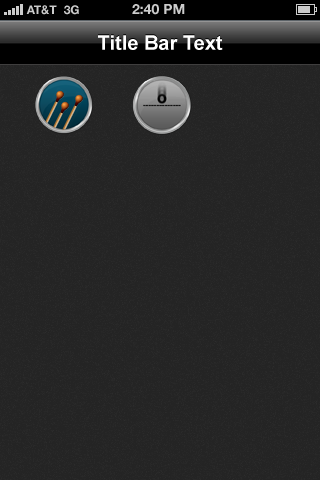
<style>
.page{position:relative;width:320px;height:480px;background:#242424}
.page>*{position:absolute;margin:0}
.t1{font:12px "HelveticaNeue-Bold";color:#cccccc}
.t2{font:14px "HelveticaNeue-Bold";color:#cccccc}
.t3{font:20px "Arial-BoldMT";color:#ffffff}
</style>
<div class="page">
<p class="t1" style="left:26px;top:5px;width:31px;height:10px">AT&amp;T</p>
<p class="t1" style="left:64px;top:5px;width:15px;height:10px">3G</p>
<p class="t2" style="left:132px;top:4px;width:53px;height:11px">2:40 PM</p>
<p class="t3" style="left:98px;top:35px;width:125px;height:15px">Title Bar Text</p>
</div>
